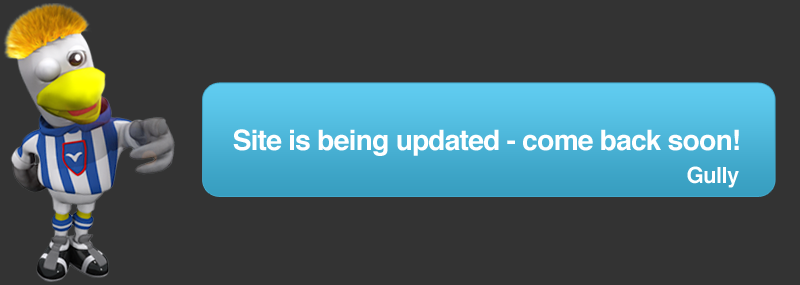
<style>
.page{position:relative;width:800px;height:285px;background:#333333}
.page>*{position:absolute;margin:0}
.t1{font:28px "Helvetica-Bold";letter-spacing:-0.025em;color:#ffffff}
.t2{font:22px "Helvetica-Bold";letter-spacing:-0.025em;color:#ffffff}
</style>
<div class="page">
<p class="t1" style="left:233px;top:129px;width:506px;height:27px">Site is being updated - come back soon!</p>
<p class="t2" style="left:687px;top:166px;width:52px;height:22px">Gully</p>
</div>
